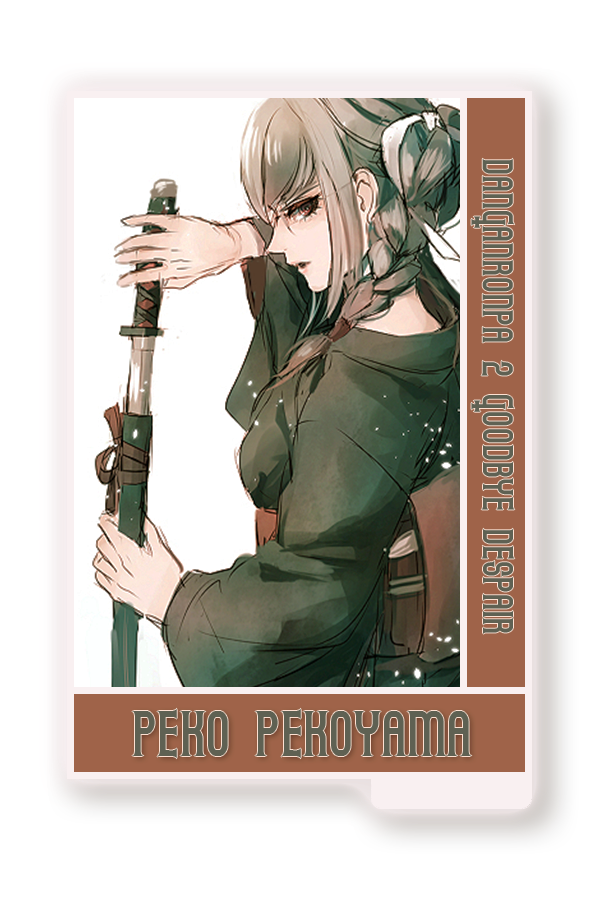
<style>
.page{position:relative;width:600px;height:900px;background:#ffffff}
.page>*{position:absolute;margin:0}
.t1{font:37.3px "Gothicum";color:#5a6360}
.t2{font:56px "Gothicum";color:#5a6360}
</style>
<div class="page">
<p class="t1" style="left:471px;top:158px;width:44px;height:476px;rotate:90deg">DANGANRONPA 2 GOODBYE DESPAIR</p>
<p class="t2" style="left:132px;top:708px;width:340px;height:51px">PEKO PEKOYAMA</p>
</div>
